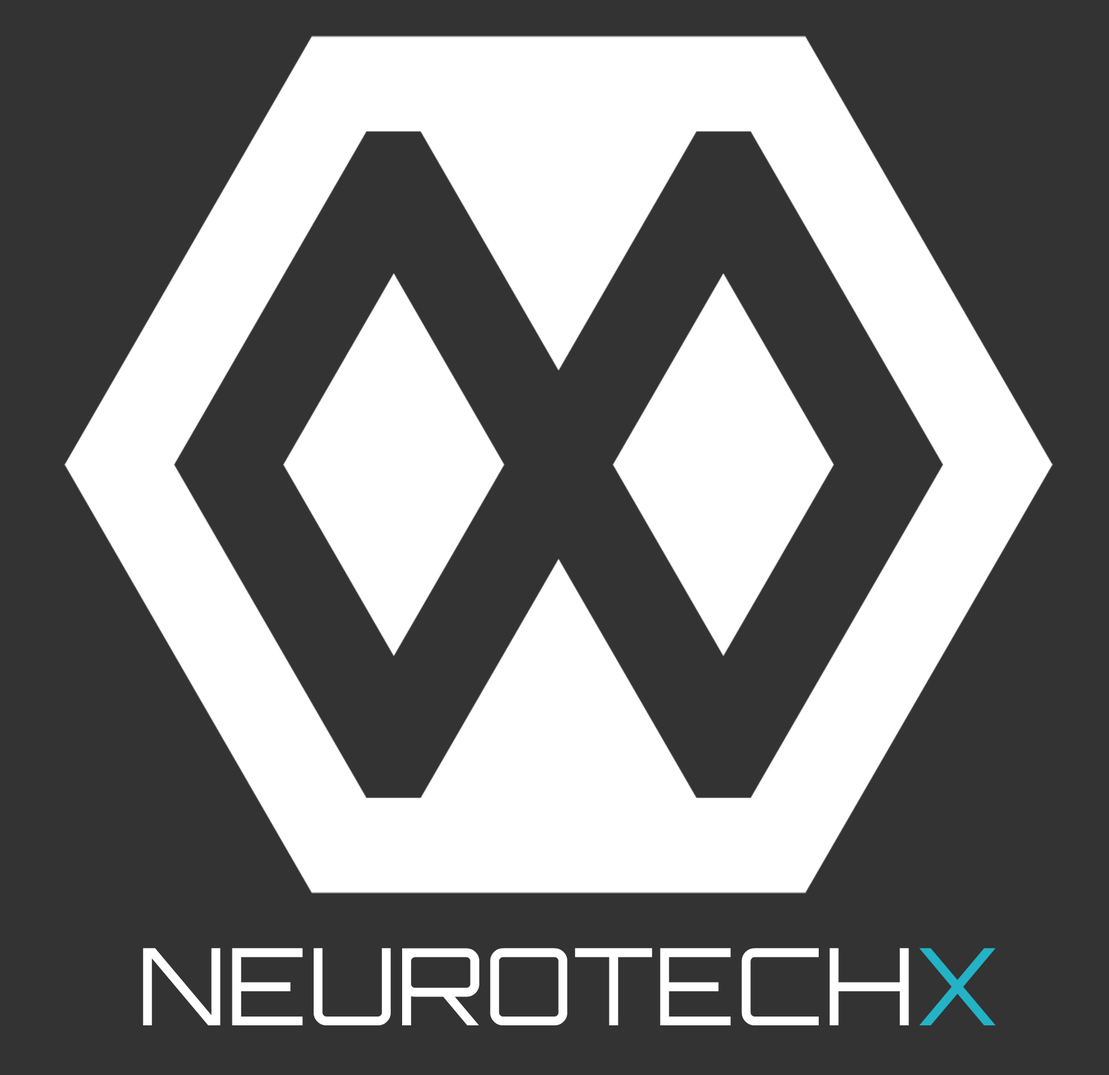
<style>
.page{position:relative;width:1109px;height:1075px;background:#333333}
.page>*{position:absolute;margin:0}
.t1{font:106.9px "Orbitron-Regular";color:#ffffff}
.t2{font:106.9px "Orbitron-Regular";color:#23b2c6}
</style>
<div class="page">
<p class="t1" style="left:143px;top:948px;width:853px;height:77px">NEUROTECH<span class="t2">X</span></p>
</div>
